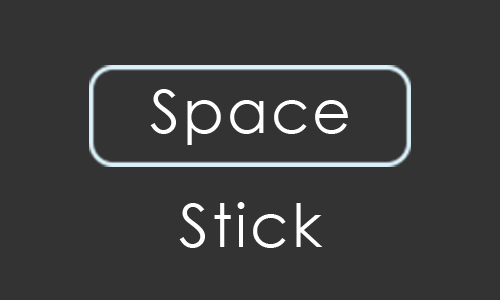
<style>
.page{position:relative;width:500px;height:300px;background:#333333}
.page>*{position:absolute;margin:0}
.t1{font:60px "CenturyGothic";letter-spacing:0.05em;color:#ffffff}
</style>
<div class="page">
<p class="t1" style="left:150px;top:89px;width:198px;height:56px">Space</p>
<p class="t1" style="left:179px;top:202px;width:144px;height:46px">Stick</p>
</div>
